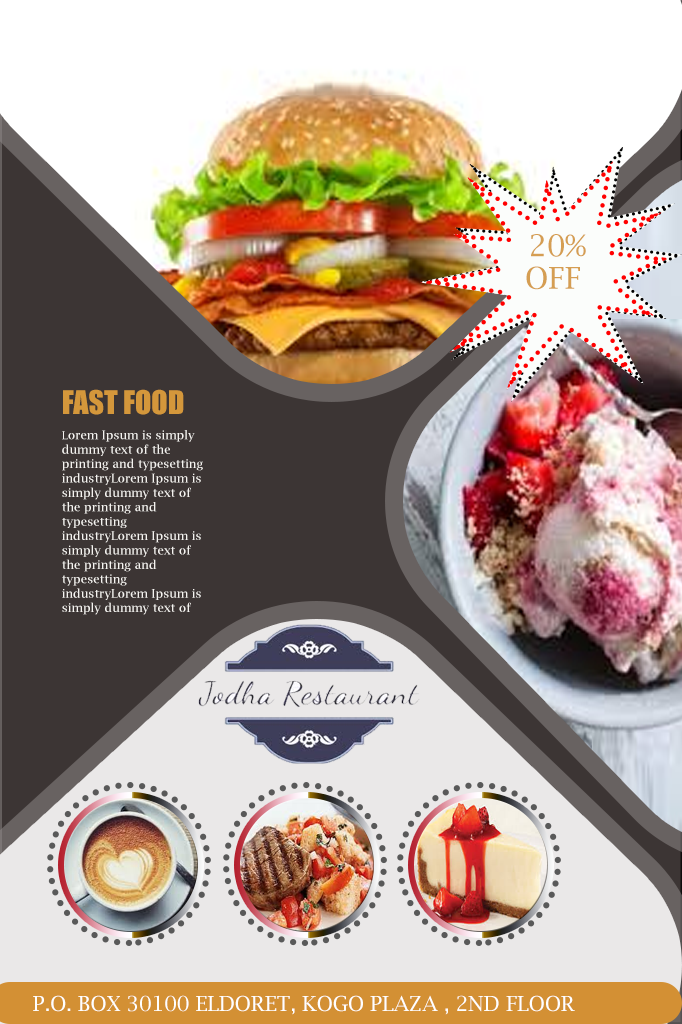
<style>
.page{position:relative;width:682px;height:1024px;background:#3c3534}
.page>*{position:absolute;margin:0}
.t1{font:30px "LucidaBright";color:#d59e52}
.t2{font:30px "Impact";color:#d4973b}
.t3{font:12px "LucidaBright";color:#f5f3f0}
.t4{font:11px "LucidaBright";color:#f5f3f0}
.t5{font:20.7px "LucidaBright";color:#ffffff}
</style>
<div class="page">
<p class="t1" style="left:531px;top:234px;width:55px;height:23px">20%</p>
<p class="t1" style="left:526px;top:266px;width:54px;height:24px">OFF</p>
<p class="t2" style="left:63px;top:389px;width:121px;height:26px">FAST FOOD</p>
<p class="t3" style="left:62px;top:430px;width:141px;height:185px"><span class="t4">L</span>orem Ipsum is simply dummy text of the printing and typesetting industryLorem Ipsum is simply dummy text of the printing and typesetting industryLorem Ipsum is simply dummy text of the printing and typesetting industryLorem Ipsum is simply dummy text of the printing and typesetting industry</p>
<p class="t5" style="left:33px;top:995px;width:542px;height:20px">P.O. BOX 30100 ELDORET, KOGO PLAZA , 2ND FLOOR</p>
</div>
